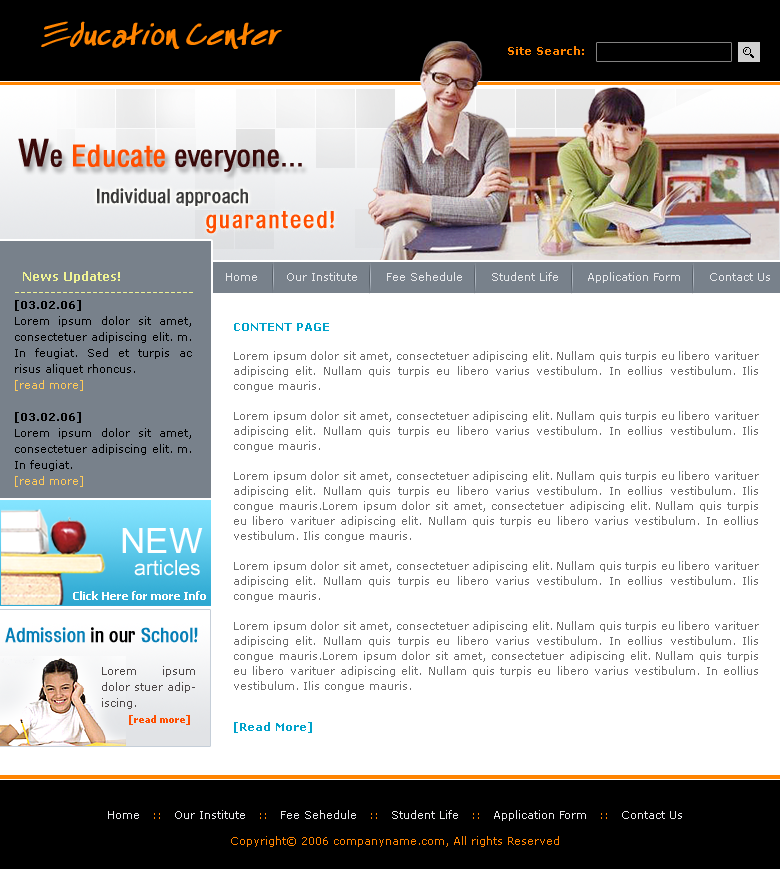
<style>
.page{position:relative;width:780px;height:869px;background:#ffffff}
.page>*{position:absolute;margin:0}
.t1{font:42px "EspecialKay";color:#ff8400;font-weight:bold}
.t2{font:11px "Verdana-Bold";color:#ff8400}
.t3{font:30px "HeliosCond";color:#390909;font-weight:bold}
.t4{font:38px "HeliosCond";color:#390909;font-weight:bold}
.t5{font:30px "HeliosCond";color:#ff4e00;font-weight:bold}
.t6{font:20px "HeadacheNormal";color:#3a3a3a}
.t7{font:24px "HeadacheNormal";letter-spacing:0.06em;color:#ff4e00}
.t8{font:12px/16px "Verdana-Bold";color:#f1f494}
.t9{font:11px "Verdana";color:#e7e8eb}
.t10{font:11px/16px "Verdana";color:#000000}
.t11{font:11px/16px "Verdana-Bold";color:#000000}
.t12{font:11px/16px "Verdana";color:#feca5a}
.t13{font:11px/15px "Verdana";color:#6c6c6c}
.t14{font:11px "Verdana-Bold";color:#00a2ca}
.t15{font:35px "ArialMT";color:#ffffff}
.t16{font:21px "ArialMT";color:#ffffff}
.t17{font:11px "Tahoma-Bold";color:#ffffff}
.t18{font:20px "HeadacheNormal";color:#057eb6}
.t19{font:20px "HeadacheNormal";color:#000000}
.t20{font:11px/16px "Verdana";color:#4f4949}
.t21{font:10px/16px "Tahoma-Bold";color:#ff4e00}
.t22{font:11px "Verdana";color:#ff8400}
</style>
<div class="page">
<p class="t1" style="left:41px;top:21px;width:241px;height:28px">Education Center</p>
<p class="t2" style="left:508px;top:46px;width:76px;height:9px">Site Search:</p>
<p class="t3" style="left:18px;top:138px;width:284px;height:34px"><span class="t4">W</span>e <span class="t5">Educate </span>everyone...</p>
<p class="t6" style="left:97px;top:188px;width:151px;height:18px">Individual approach</p>
<p class="t7" style="left:206px;top:211px;width:128px;height:23px">guaranteed!</p>
<p class="t8" style="left:15px;top:271px;width:178px;height:22px">News Updates!<br>------------------------------</p>
<p class="t9" style="left:226px;top:272px;width:544px;height:11px">Home       Our Institute       Fee Sehedule       Student Life       Application Form       Contact Us</p>
<p class="t10" style="left:15px;top:300px;width:177px;height:187px;text-align:justify"><span class="t11">[03.02.06]<br></span>Lorem ipsum dolor sit amet, consectetuer adipiscing elit. m. In feugiat. Sed et turpis ac risus aliquet rhoncus.<br><span class="t12">[read more]<br><br></span><span class="t11">[03.02.06]<br></span>Lorem ipsum dolor sit amet, consectetuer adipiscing elit. m. In feugiat. <br><span class="t12">[read more]</span></p>
<p class="t13" style="left:234px;top:323px;width:525px;height:410px;text-align:justify"><span class="t14">CONTENT PAGE<br><br></span>Lorem ipsum dolor sit amet, consectetuer adipiscing elit. Nullam quis turpis eu libero varituer adipiscing elit. Nullam quis turpis eu libero varius vestibulum. In eollius vestibulum. Ilis congue mauris.<br><br>Lorem ipsum dolor sit amet, consectetuer adipiscing elit. Nullam quis turpis eu libero varituer adipiscing elit. Nullam quis turpis eu libero varius vestibulum. In eollius vestibulum. Ilis congue mauris.<br><br>Lorem ipsum dolor sit amet, consectetuer adipiscing elit. Nullam quis turpis eu libero varituer adipiscing elit. Nullam quis turpis eu libero varius vestibulum. In eollius vestibulum. Ilis congue mauris.Lorem ipsum dolor sit amet, consectetuer adipiscing elit. Nullam quis turpis eu libero varituer adipiscing elit. Nullam quis turpis eu libero varius vestibulum. In eollius vestibulum. Ilis congue mauris.<br><br>Lorem ipsum dolor sit amet, consectetuer adipiscing elit. Nullam quis turpis eu libero varituer adipiscing elit. Nullam quis turpis eu libero varius vestibulum. In eollius vestibulum. Ilis congue mauris.<br><br>Lorem ipsum dolor sit amet, consectetuer adipiscing elit. Nullam quis turpis eu libero varituer adipiscing elit. Nullam quis turpis eu libero varius vestibulum. In eollius vestibulum. Ilis congue mauris.Lorem ipsum dolor sit amet, consectetuer adipiscing elit. Nullam quis turpis eu libero varituer adipiscing elit. Nullam quis turpis eu libero varius vestibulum. In eollius vestibulum. Ilis congue mauris.<br><br><br><span class="t14">[Read More]</span></p>
<p class="t15" style="left:122px;top:528px;width:81px;height:25px">NEW</p>
<p class="t16" style="left:134px;top:560px;width:66px;height:16px">articles</p>
<p class="t17" style="left:73px;top:591px;width:133px;height:9px">Click Here for more Info</p>
<p class="t18" style="left:5px;top:627px;width:193px;height:16px">Admission <span class="t19">in our</span> School!</p>
<p class="t20" style="left:102px;top:666px;width:93px;height:59px;text-align:justify">Lorem ipsum dolor stuer adipiscing.<br>       <span class="t21">[read more]</span></p>
<p class="t9" style="left:108px;top:810px;width:574px;height:11px">Home   <span class="t22">::</span>   Our Institute   <span class="t22">:: </span>  Fee Sehedule   <span class="t22">:: </span>  Student Life   <span class="t22">:: </span>  Application Form   <span class="t22">::  </span> Contact Us</p>
<p class="t22" style="left:231px;top:836px;width:328px;height:11px">Copyright© 2006 companyname.com, All rights Reserved</p>
</div>
